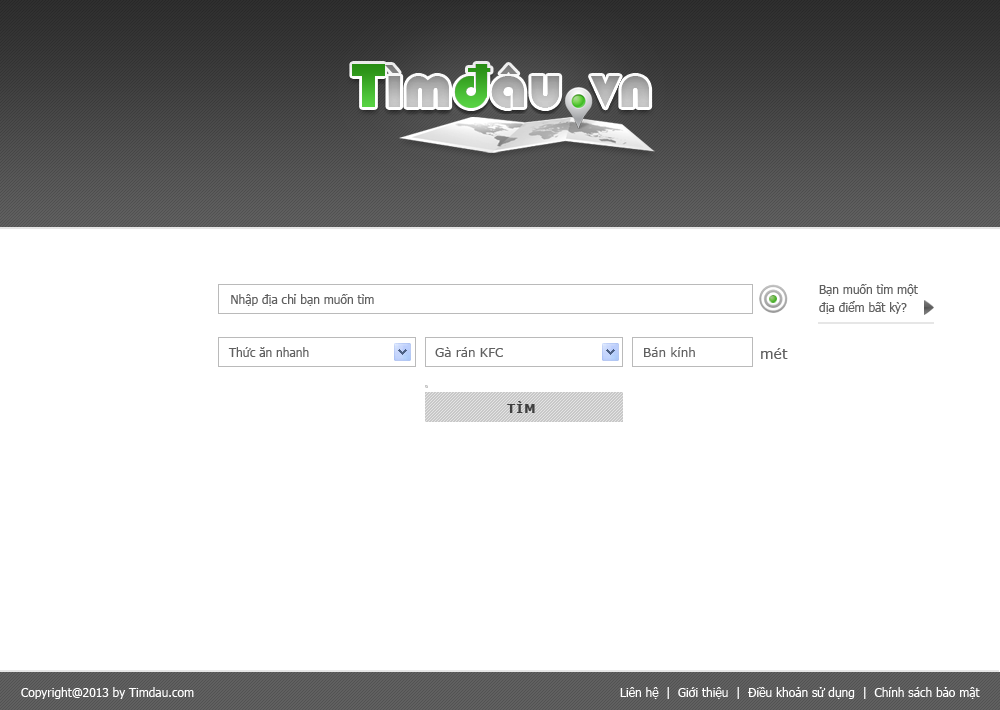
<style>
.page{position:relative;width:1000px;height:710px;background:#ffffff}
.page>*{position:absolute;margin:0}
.t1{font:12px "Tahoma";color:#606060}
.t2{font:12px/18px "Tahoma";color:#606060}
.t3{font:12px "Verdana";color:#606060}
.t4{font:14px "Verdana";color:#606060}
.t5{font:12px "Verdana-Bold";letter-spacing:0.1em;color:#404040}
.t6{font:12px "Tahoma";color:#ffffff}
</style>
<div class="page">
<p class="t1" style="left:231px;top:294px;width:143px;height:12px">Nhập địa chỉ bạn muốn tìm</p>
<p class="t2" style="left:819px;top:284px;width:99px;height:30px">Bạn muốn tìm một <br>địa điểm bất kỳ?</p>
<p class="t1" style="left:228px;top:347px;width:81px;height:10px">Thức ăn nhanh</p>
<p class="t3" style="left:435px;top:347px;width:68px;height:10px">Gà rán KFC</p>
<p class="t3" style="left:644px;top:347px;width:51px;height:10px">Bán kính</p>
<p class="t4" style="left:761px;top:348px;width:27px;height:11px">mét</p>
<p class="t5" style="left:507px;top:401px;width:28px;height:12px">TÌM</p>
<p class="t6" style="left:21px;top:687px;width:173px;height:12px">Copyright@2013 by Timdau.com</p>
<p class="t6" style="left:620px;top:687px;width:360px;height:12px">Liên hệ  |  Giới thiệu  |  Điều khoản sử dụng  |  Chính sách bảo mật</p>
</div>
